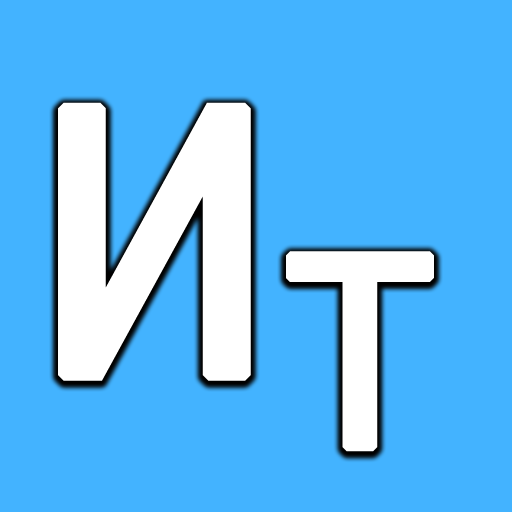
<style>
.page{position:relative;width:512px;height:512px;background:#43b3ff}
.page>*{position:absolute;margin:0}
.t1{font:417.8px "Consolas";letter-spacing:0.03em;color:#ffffff;font-weight:bold}
.t2{font:300px "Consolas";letter-spacing:0.03em;color:#ffffff;font-weight:bold}
</style>
<div class="page">
<p class="t1" style="left:58px;top:102px;width:193px;height:279px">И</p>
<p class="t2" style="left:286px;top:251px;width:148px;height:201px">Т</p>
</div>
